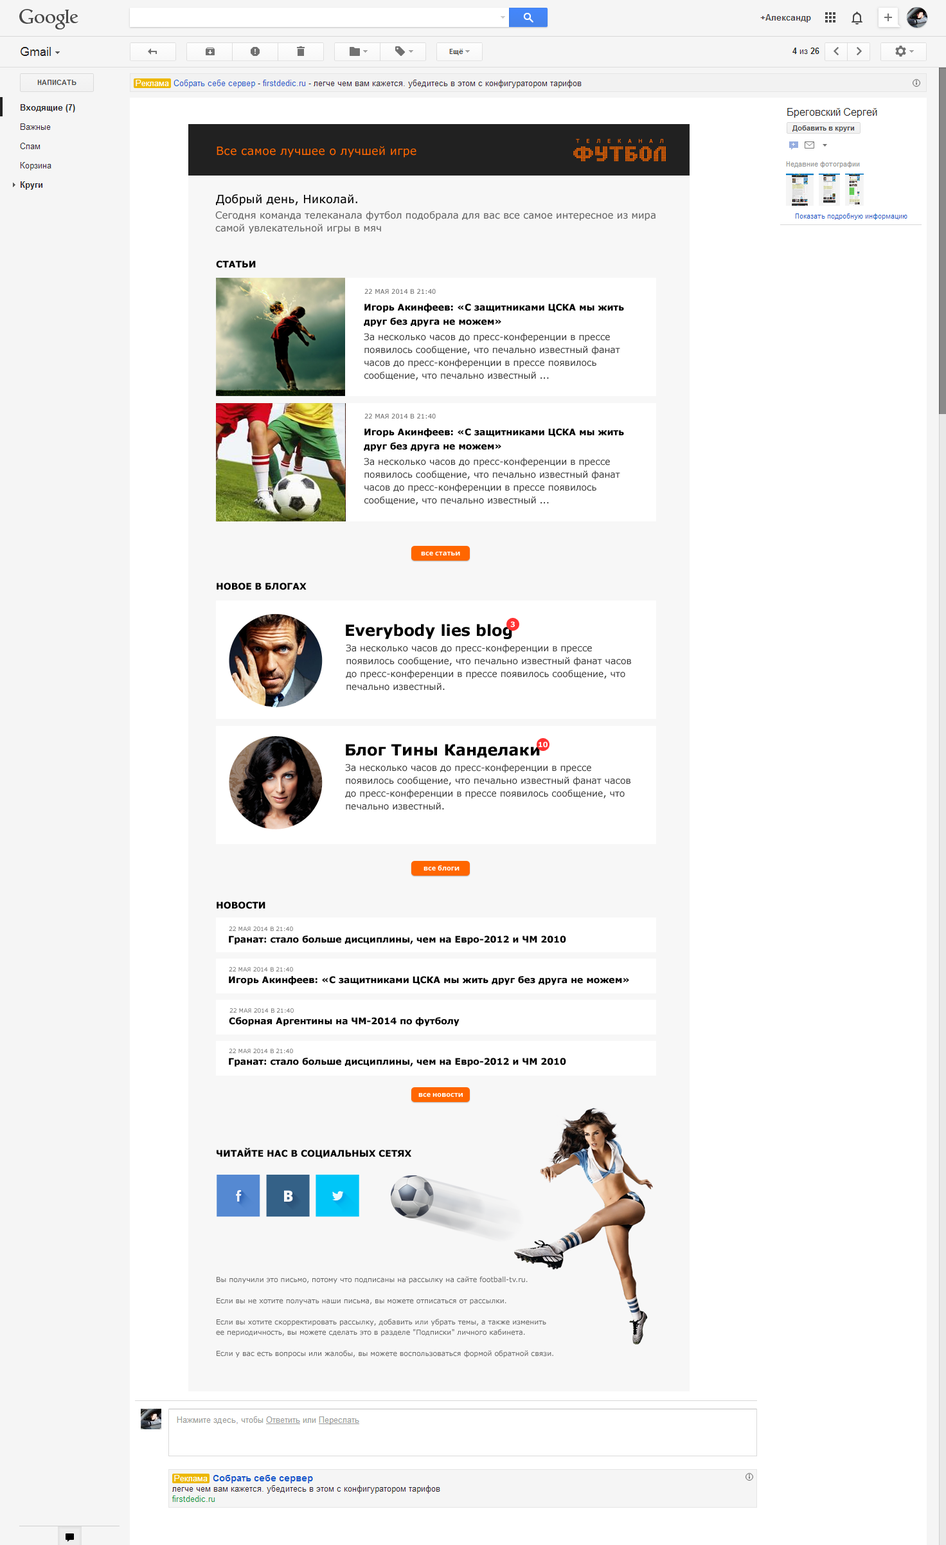
<style>
.page{position:relative;width:946px;height:1545px;background:#ffffff}
.page>*{position:absolute;margin:0}
.t1{font:11.6px "Verdana";color:#ff6600}
.t2{font:5.1px "Tahoma";letter-spacing:1.4em;color:#ff6600;text-transform:uppercase;font-weight:bold}
.t3{font:11.6px "Verdana";color:#000000}
.t4{font:9.6px/9px "Verdana";color:#666666}
.t5{font:9px "Verdana-Bold";color:#000000;text-transform:uppercase}
.t6{font:6.4px "Verdana";color:#666666;text-transform:uppercase}
.t7{font:9px/10.3px "Verdana-Bold";color:#000000}
.t8{font:9px/12.9px "Verdana";color:#333333}
.t9{font:7.1px "OpenSans-Bold";color:#ffffff}
.t10{font:15.4px "Verdana-Bold";color:#000000}
.t11{font:7.1px "Verdana-Bold";color:#ffffff}
.t12{font:5.8px "Verdana";color:#666666;text-transform:uppercase}
.t13{font:9px "Verdana-Bold";color:#000000}
.t14{font:15.4px "OpenSans-Extrabold";color:#fafafa}
.t15{font:7.1px/6.4px "Verdana";color:#666666}
</style>
<div class="page">
<p class="t1" style="left:217px;top:146px;width:200px;height:12px">Все самое лучшее о лучшей игре</p>
<p class="t2" style="left:576px;top:139px;width:87px;height:4px">телеканал</p>
<p class="t3" style="left:216px;top:194px;width:141px;height:12px">Добрый день, Николай.</p>
<p class="t4" style="left:215px;top:211px;width:441px;height:22px">Сегодня команда телеканала футбол подобрала для вас все самое интересное из мира<br>самой увлекательной игры в мяч</p>
<p class="t5" style="left:216px;top:260px;width:40px;height:8px">статьи</p>
<p class="t6" style="left:364px;top:289px;width:72px;height:5px">22 мая 2014 в 21:40</p>
<p class="t7" style="left:364px;top:303px;width:260px;height:24px">Игорь Акинфеев: «С защитниками ЦСКА мы жить<br>друг без друга не можем»</p>
<p class="t8" style="left:364px;top:333px;width:256px;height:48px">За несколько часов до пресс-конференции в прессе появилось сообщение, что печально известный фанат часов до пресс-конференции в прессе появилось сообщение, что печально известный ...</p>
<p class="t6" style="left:364px;top:413px;width:72px;height:6px">22 мая 2014 в 21:40</p>
<p class="t7" style="left:364px;top:428px;width:260px;height:23px">Игорь Акинфеев: «С защитниками ЦСКА мы жить<br>друг без друга не можем»</p>
<p class="t8" style="left:364px;top:458px;width:256px;height:47px">За несколько часов до пресс-конференции в прессе появилось сообщение, что печально известный фанат часов до пресс-конференции в прессе появилось сообщение, что печально известный ...</p>
<p class="t9" style="left:421px;top:552px;width:39px;height:3px">все статьи</p>
<p class="t5" style="left:217px;top:582px;width:90px;height:8px">новое в блогах</p>
<p class="t10" style="left:346px;top:624px;width:166px;height:15px">Everybody lies blog</p>
<p class="t11" style="left:510px;top:621px;width:5px;height:6px">3</p>
<p class="t8" style="left:346px;top:644px;width:285px;height:46px">За несколько часов до пресс-конференции в прессе появилось сообщение, что печально известный фанат часов до пресс-конференции в прессе появилось сообщение, что печально известный.</p>
<p class="t10" style="left:346px;top:744px;width:194px;height:14px">Блог Тины Канделаки</p>
<p class="t11" style="left:539px;top:741px;width:9px;height:7px">10</p>
<p class="t8" style="left:345px;top:764px;width:286px;height:46px">За несколько часов до пресс-конференции в прессе появилось сообщение, что печально известный фанат часов до пресс-конференции в прессе появилось сообщение, что печально известный.</p>
<p class="t9" style="left:424px;top:865px;width:36px;height:5px">все блоги</p>
<p class="t5" style="left:217px;top:901px;width:49px;height:8px">новости</p>
<p class="t12" style="left:229px;top:926px;width:64px;height:5px">22 мая 2014 в 21:40</p>
<p class="t13" style="left:229px;top:935px;width:337px;height:9px">Гранат: стало больше дисциплины, чем на Евро-2012 и ЧМ 2010</p>
<p class="t13" style="left:229px;top:976px;width:400px;height:9px">Игорь Акинфеев: «С защитниками ЦСКА мы жить друг без друга не можем»</p>
<p class="t12" style="left:229px;top:967px;width:64px;height:4px">22 мая 2014 в 21:40</p>
<p class="t12" style="left:230px;top:1008px;width:64px;height:5px">22 мая 2014 в 21:40</p>
<p class="t13" style="left:229px;top:1017px;width:231px;height:9px">Сборная Аргентины на ЧМ-2014 по футболу</p>
<p class="t12" style="left:229px;top:1048px;width:64px;height:5px">22 мая 2014 в 21:40</p>
<p class="t13" style="left:229px;top:1058px;width:337px;height:8px">Гранат: стало больше дисциплины, чем на Евро-2012 и ЧМ 2010</p>
<p class="t9" style="left:419px;top:1093px;width:44px;height:4px">все новости</p>
<p class="t5" style="left:217px;top:1148px;width:194px;height:10px">читайте нас в социальных сетях</p>
<p class="t14" style="left:284px;top:1190px;width:9px;height:12px">B</p>
<p class="t15" style="left:216px;top:1276px;width:338px;height:82px">Вы получили это письмо, потому что подписаны на рассылку на сайте football-tv.ru. <br><br>Если вы не хотите получать наши письма, вы можете отписаться от рассылки.<br><br>Если вы хотите скорректировать рассылку, добавить или убрать темы, а также изменить<br>ее периодичность, вы можете сделать это в разделе "Подписки" личного кабинета.<br><br>Если у вас есть вопросы или жалобы, вы можете воспользоваться формой обратной связи.</p>
</div>
